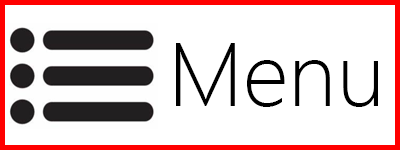
<style>
.page{position:relative;width:400px;height:150px;background:#ffffff}
.page>*{position:absolute;margin:0}
.t1{font:90px "SegoeUI-Light";color:#000000}
</style>
<div class="page">
<p class="t1" style="left:176px;top:43px;width:202px;height:64px">Menu</p>
</div>
